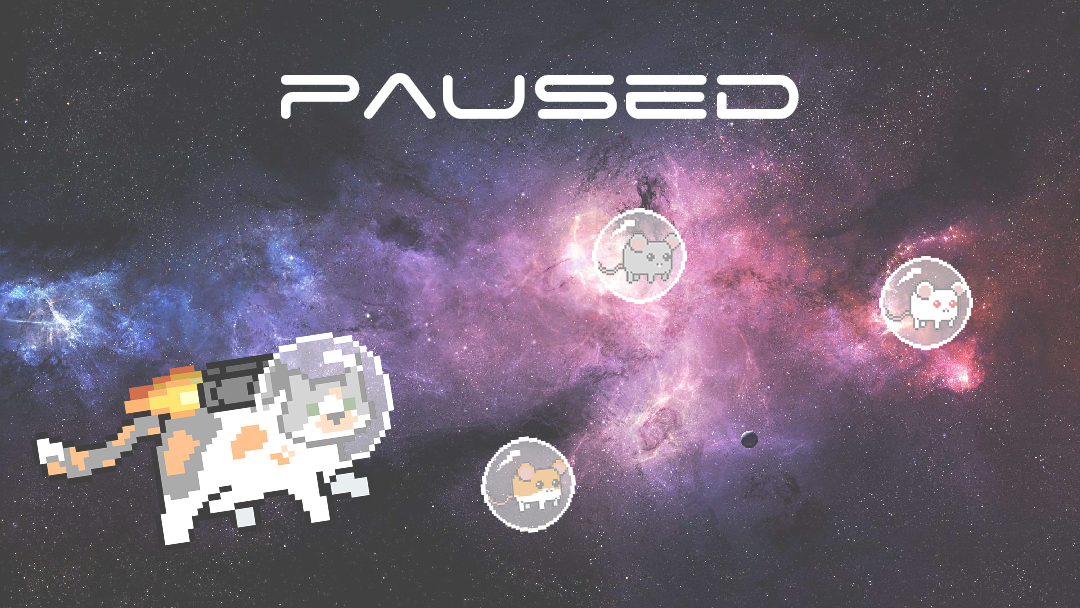
<style>
.page{position:relative;width:1080px;height:608px}
.page>*{position:absolute;margin:0}
.t1{font:100px "SpaceAge";color:#ffffff}
</style>
<div class="page">
<p class="t1" style="left:281px;top:73px;width:518px;height:46px">paused</p>
</div>
